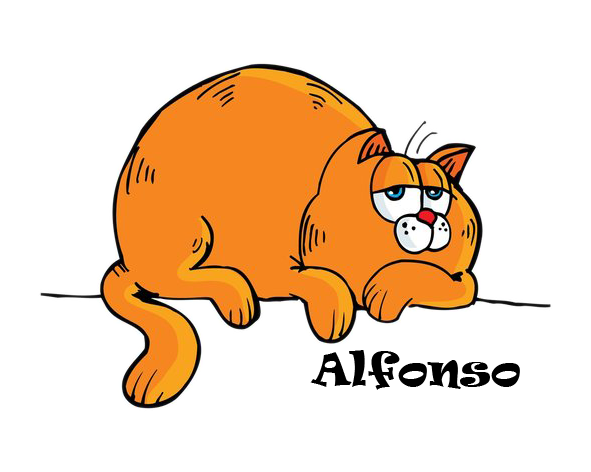
<style>
.page{position:relative;width:591px;height:472px;background:#ffffff}
.page>*{position:absolute;margin:0}
.t1{font:41.7px "Ravie";color:#000000}
</style>
<div class="page">
<p class="t1" style="left:310px;top:350px;width:210px;height:40px">Alfonso</p>
</div>
